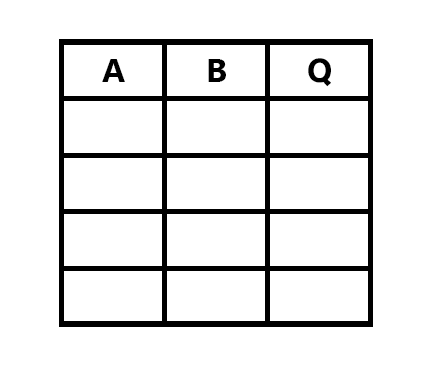
<style>
.page{position:relative;width:431px;height:365px;background:#ffffff}
.page>*{position:absolute;margin:0}
.t1{font:33.3px "SegoeUIVariable-BoldText";color:#000000}
</style>
<div class="page">
<p class="t1" style="left:102px;top:59px;width:23px;height:23px">A</p>
<p class="t1" style="left:208px;top:59px;width:18px;height:23px">B</p>
<p class="t1" style="left:308px;top:58px;width:23px;height:29px">Q</p>
</div>
